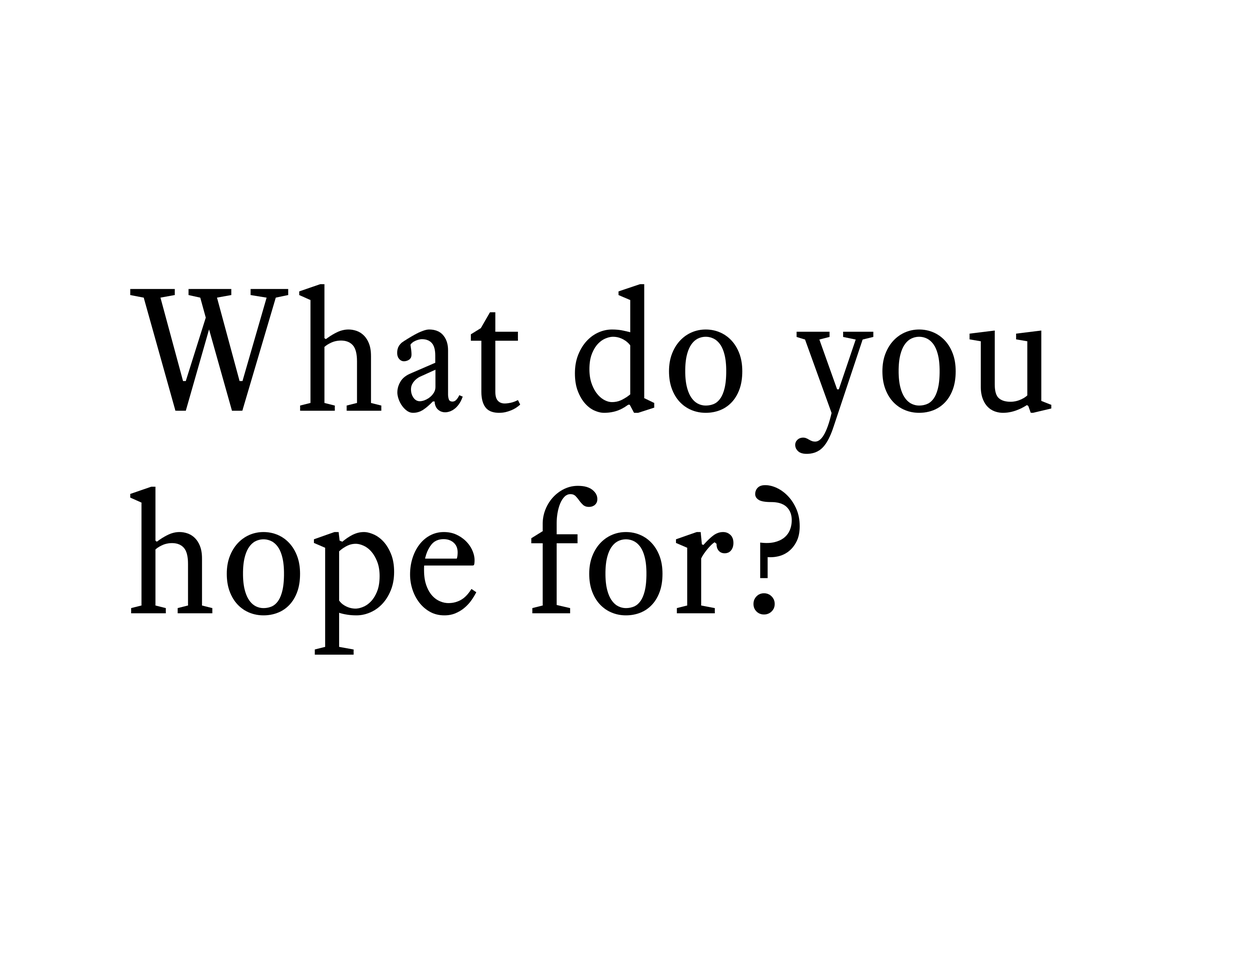
<style>
.page{position:relative;width:1242px;height:960px;background:#ffffff}
.page>*{position:absolute;margin:0}
.t1{font:172.5px/202.3px "EquityTextB";letter-spacing:0.025em;color:#000000}
</style>
<div class="page">
<p class="t1" style="left:130px;top:284px;width:922px;height:371px">What do you<br>hope for?</p>
</div>
